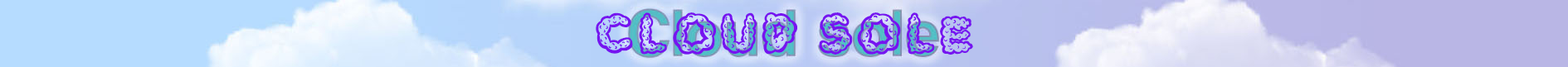
<style>
.page{position:relative;width:1568px;height:67px}
.page>*{position:absolute;margin:0}
.t1{font:62.2px "Cloudy";letter-spacing:0.025em;color:#7614f0}
</style>
<div class="page">
<p class="t1" style="left:596px;top:12px;width:377px;height:43px">Cloud sole</p>
</div>
